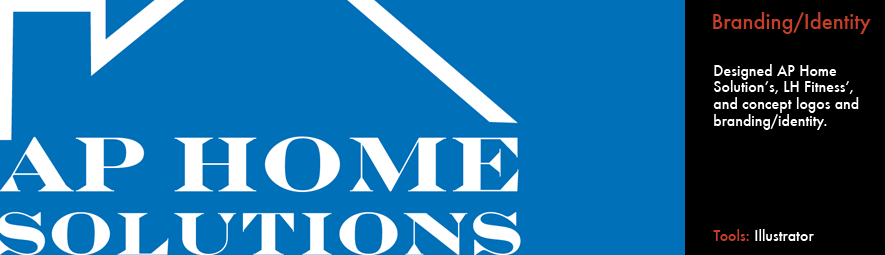
<style>
.page{position:relative;width:885px;height:255px;background:#0070b9}
.page>*{position:absolute;margin:0}
.t1{font:20px "Futura-Medium";color:#c63e28}
.t2{font:14px "Futura-Medium";color:#ffffff}
.t3{font:14px "Futura-Medium";color:#c63e28}
</style>
<div class="page">
<p class="t1" style="left:713px;top:12px;width:158px;height:22px">Branding/Identity</p>
<p class="t2" style="left:713px;top:64px;width:146px;height:66px">Designed AP Home Solution’s, LH Fitness’, and concept logos and branding/identity.</p>
<p class="t2" style="left:713px;top:229px;width:101px;height:12px"><span class="t3">Tools: </span>Illustrator</p>
</div>
